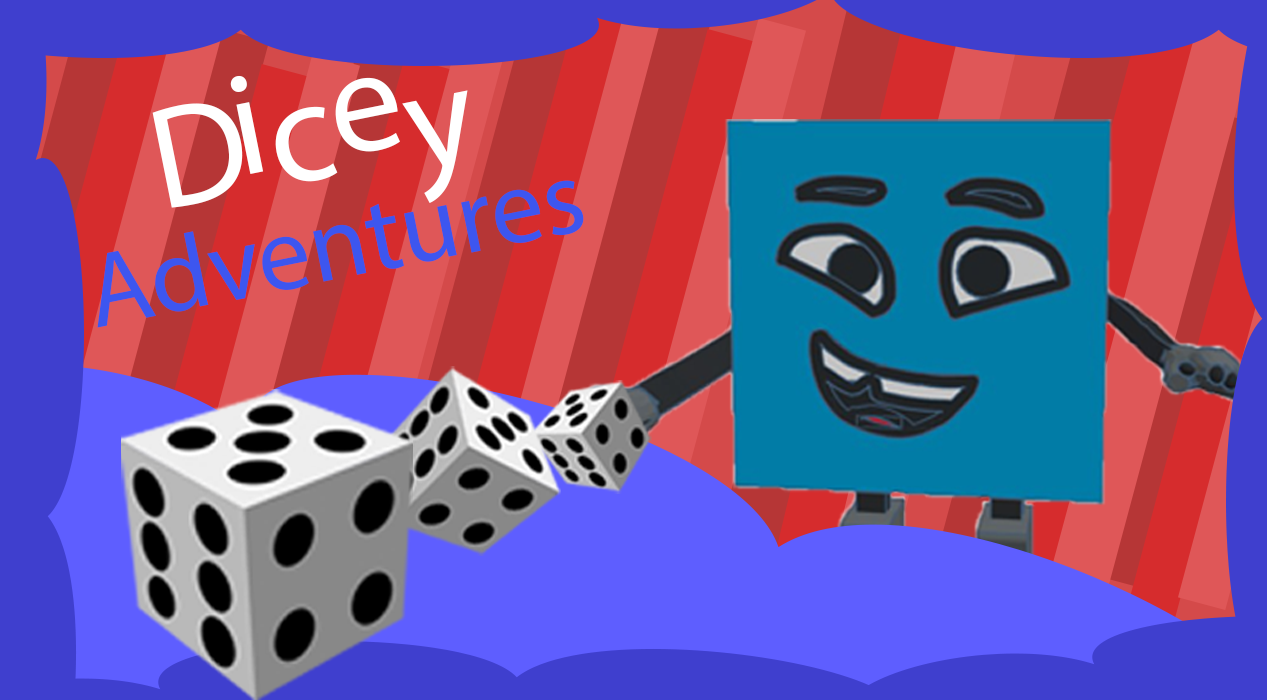
<style>
.page{position:relative;width:1267px;height:700px}
.page>*{position:absolute;margin:0}
.t1{font:145.8px "MyriadPro-Regular";color:#ffffff}
.t2{font:105.5px "MyriadPro-Regular";color:#3d56ef}
</style>
<div class="page">
<p class="t1" style="left:230px;top:75px;width:34px;height:99px;rotate:-11deg">i</p>
<p class="t1" style="left:335px;top:77px;width:65px;height:75px;rotate:-11deg">e</p>
<p class="t1" style="left:402px;top:90px;width:66px;height:113px;rotate:-11deg">y</p>
<p class="t1" style="left:152px;top:103px;width:91px;height:105px;rotate:-11deg">D</p>
<p class="t1" style="left:275px;top:106px;width:63px;height:76px;rotate:-11deg">c</p>
<p class="t2" style="left:97px;top:180px;width:487px;height:148px;rotate:-11deg">Adventuress</p>
</div>
